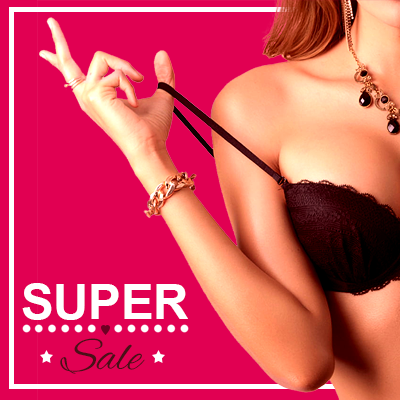
<style>
.page{position:relative;width:400px;height:400px;background:#e10052}
.page>*{position:absolute;margin:0}
.t1{font:48.8px "Arial-BoldMT";color:#ffffff}
.t2{font:48.8px "AlexBrush-Regular";color:#4a1017}
</style>
<div class="page">
<p class="t1" style="left:22px;top:283px;width:166px;height:37px">SUPER</p>
<p class="t2" style="left:60px;top:338px;width:85px;height:36px">Sale</p>
</div>
